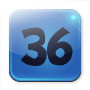
<style>
.page{position:relative;width:90px;height:90px;background:#ffffff}
.page>*{position:absolute;margin:0}
.t1{font:61.9px "Brady-Bunch"}
</style>
<div class="page">
<p class="t1" style="left:20px;top:27px;width:53px;height:39px">36</p>
</div>
